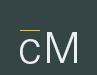
<style>
.page{position:relative;width:97px;height:75px;background:#354546}
.page>*{position:absolute;margin:0}
.t1{font:43.5px "HelveticaLTStd-Light";letter-spacing:0.05em;color:#ecf0f1}
</style>
<div class="page">
<p class="t1" style="left:20px;top:32px;width:57px;height:32px">cM</p>
</div>
